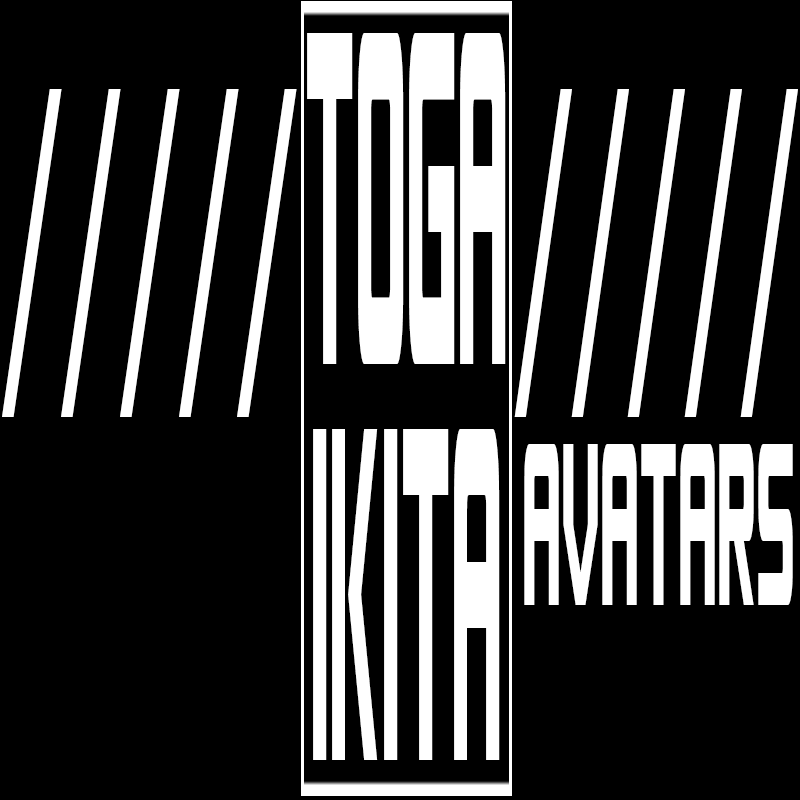
<style>
.page{position:relative;width:800px;height:800px;background:#000000}
.page>*{position:absolute;margin:0}
.t1{font:529px "SpaceMarineNominal";color:#ffffff;scale:0.1 1}
.t2{font:452.4px "MyriadPro-Regular";color:#ffffff;scale:0.38 1}
.t3{font:452.4px "MyriadPro-Regular";color:#ffffff;scale:0.36 1}
.t4{font:256.9px "SpaceMarineNominal";color:#ffffff;scale:0.15 1}
</style>
<div class="page">
<p class="t1" style="left:307px;top:33px;width:199px;height:331px">TOGA</p>
<p class="t2" style="left:2px;top:89px;width:295px;height:328px">/////</p>
<p class="t3" style="left:514px;top:89px;width:284px;height:328px">/////</p>
<p class="t1" style="left:313px;top:429px;width:187px;height:331px">ikita</p>
<p class="t4" style="left:524px;top:444px;width:269px;height:161px">avatars</p>
</div>
